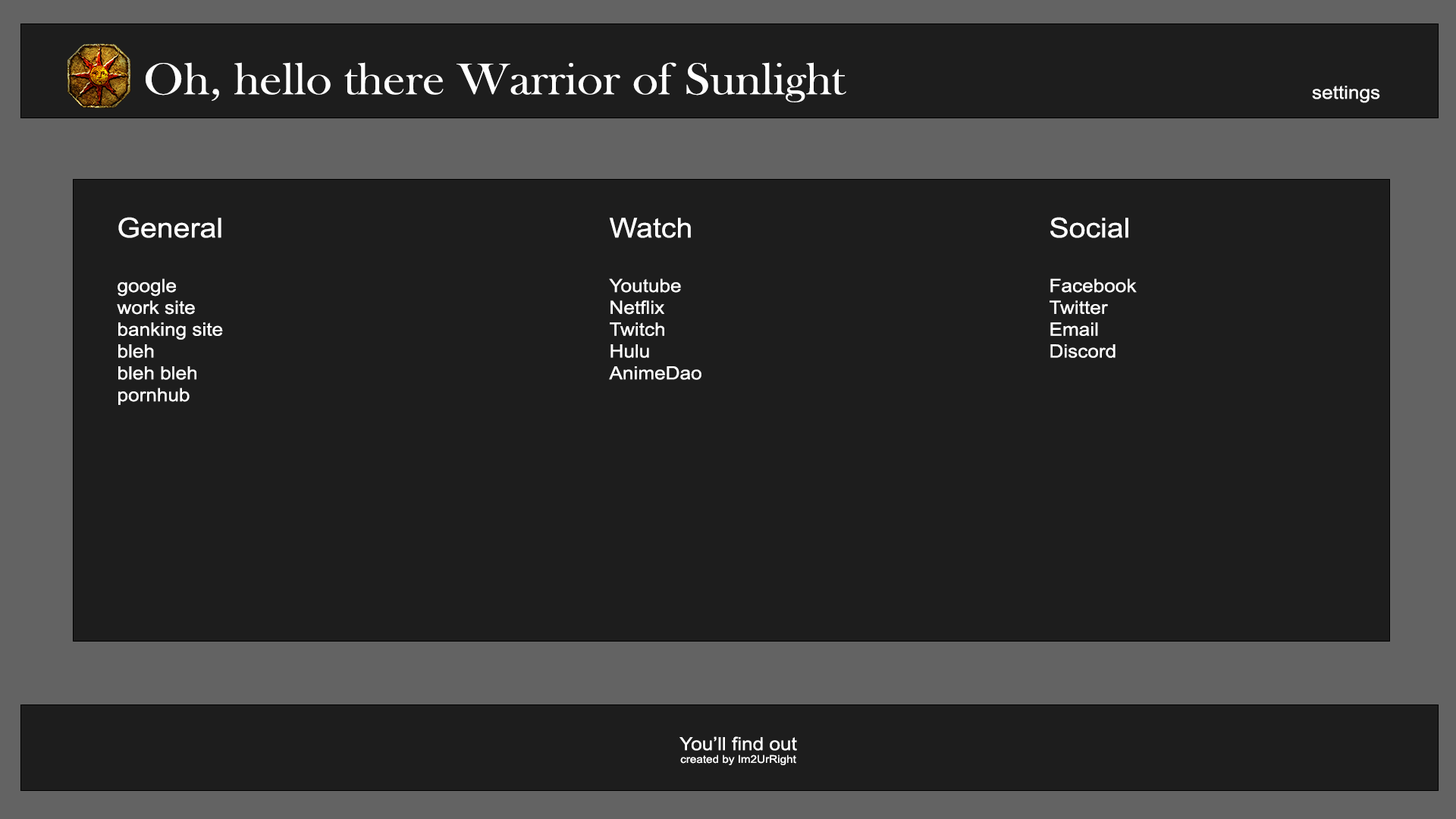
<style>
.page{position:relative;width:1456px;height:819px;background:#1d1d1d}
.page>*{position:absolute;margin:0}
.t1{font:45.5px "BaskOldFace";color:#ffffff;scale:1.09 1}
.t2{font:18.2px "ArialMT";color:#ffffff;scale:1.09 1}
.t3{font:27.3px "ArialMT";color:#ffffff;scale:1.09 1}
.t4{font:10.6px "ArialMT";color:#ffffff;scale:1.09 1}
</style>
<div class="page">
<p class="t1" style="left:146px;top:62px;width:700px;height:40px">Oh, hello there Warrior of Sunlight</p>
<p class="t2" style="left:1312px;top:86px;width:68px;height:17px">settings</p>
<p class="t2" style="left:117px;top:217px;width:106px;height:188px"><span class="t3">General<br><br></span>google<br>work site<br>banking site<br>bleh<br>bleh bleh<br>pornhub</p>
<p class="t2" style="left:609px;top:218px;width:92px;height:162px"><span class="t3">Watch<br><br></span>Youtube<br>Netflix<br>Twitch<br>Hulu<br>AnimeDao</p>
<p class="t2" style="left:1050px;top:217px;width:87px;height:141px"><span class="t3">Social<br><br></span>Facebook<br>Twitter<br>Email<br>Discord</p>
<p class="t4" style="left:679px;top:736px;width:118px;height:29px;text-align:center"><span class="t2">You’ll find out<br></span>created by Im2UrRight</p>
</div>
